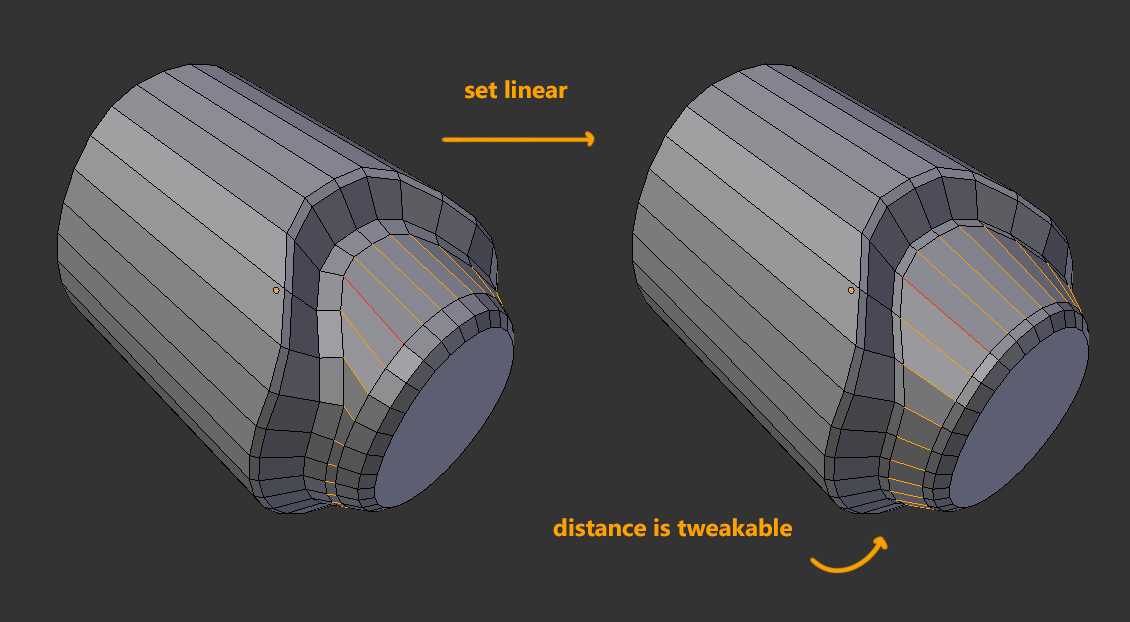
<style>
.page{position:relative;width:1130px;height:622px;background:#333333}
.page>*{position:absolute;margin:0}
.t1{font:24px "SegoeUI-Bold";color:#fea200}
</style>
<div class="page">
<p class="t1" style="left:465px;top:80px;width:103px;height:19px">set linear</p>
<p class="t1" style="left:553px;top:518px;width:239px;height:19px">distance is tweakable</p>
</div>
